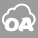
<style>
.page{position:relative;width:38px;height:38px;background:#9b9b9b}
.page>*{position:absolute;margin:0}
.t1{font:17.7px "Jpangtouyu";letter-spacing:-0.03em;color:#ffffff;font-weight:bold}
</style>
<div class="page">
<p class="t1" style="left:4px;top:17px;width:30px;height:15px">OA</p>
</div>
